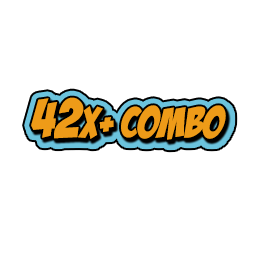
<style>
.page{position:relative;width:256px;height:256px;background:#ffffff}
.page>*{position:absolute;margin:0}
.t1{font:42px "BadaBoomBB";color:#ee9b18}
.t2{font:54px "BadaBoomBB";color:#ee9b18}
</style>
<div class="page">
<p class="t1" style="left:31px;top:97px;width:195px;height:43px"><span class="t2">42</span>x+ COMBO</p>
</div>
